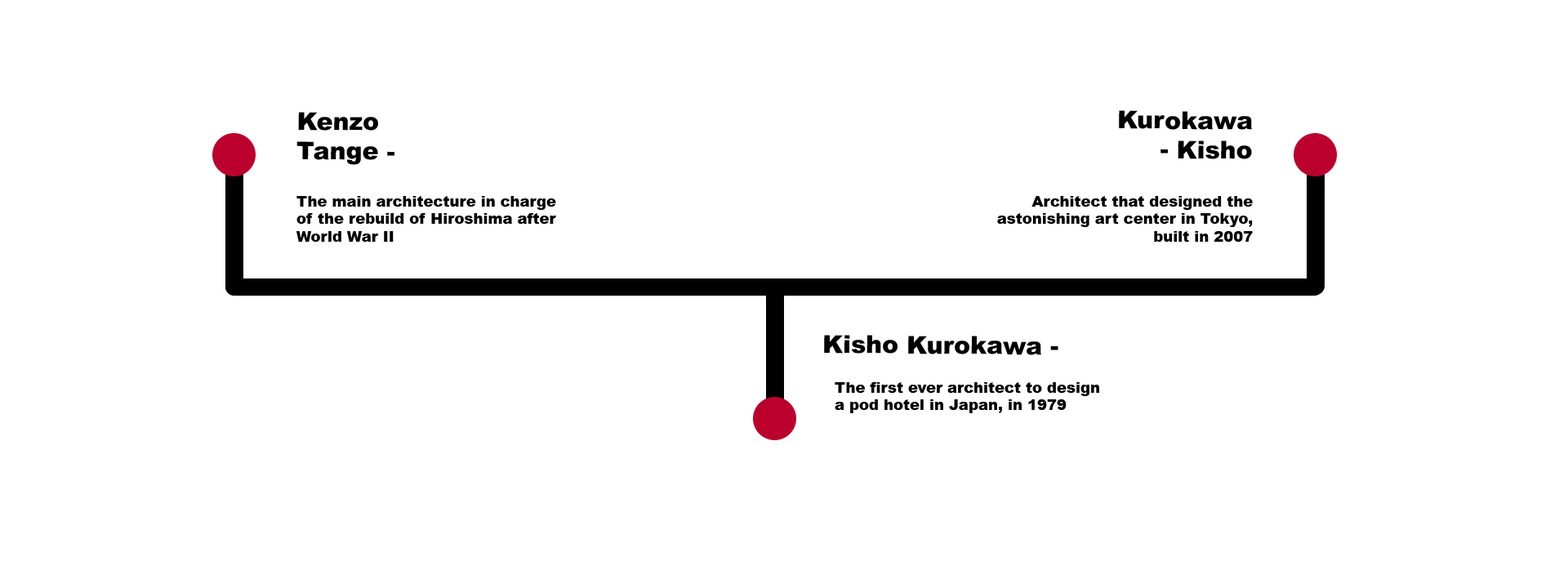
<style>
.page{position:relative;width:1568px;height:588px;background:#ffffff}
.page>*{position:absolute;margin:0}
.t1{font:24.5px "Arial-Black";color:#000000}
.t2{font:14.7px "Arial-Black";color:#000000}
</style>
<div class="page">
<p class="t1" style="left:296px;top:112px;width:98px;height:53px">Kenzo Tange -</p>
<p class="t1" style="left:1119px;top:110px;width:133px;height:49px;text-align:right">Kurokawa<br> - Kisho</p>
<p class="t2" style="left:296px;top:196px;width:260px;height:46px">The main architecture in charge of the rebuild of Hiroshima after World War II</p>
<p class="t2" style="left:997px;top:196px;width:256px;height:46px;text-align:right">Architect that designed the astonishing art center in Tokyo, built in 2007</p>
<p class="t1" style="left:824px;top:335px;width:234px;height:20px">Kisho Kurokawa -</p>
<p class="t2" style="left:835px;top:382px;width:264px;height:31px">The first ever architect to design a pod hotel in Japan, in 1979</p>
</div>
